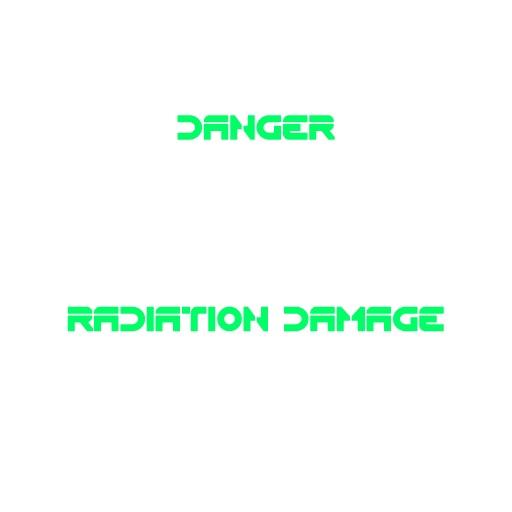
<style>
.page{position:relative;width:512px;height:512px;background:#ffffff}
.page>*{position:absolute;margin:0}
.t1{font:36px "Flynn";color:#00ff66}
</style>
<div class="page">
<p class="t1" style="left:177px;top:115px;width:158px;height:25px">DANGER</p>
<p class="t1" style="left:67px;top:306px;width:377px;height:26px">RADIATION DAMAGE</p>
</div>
